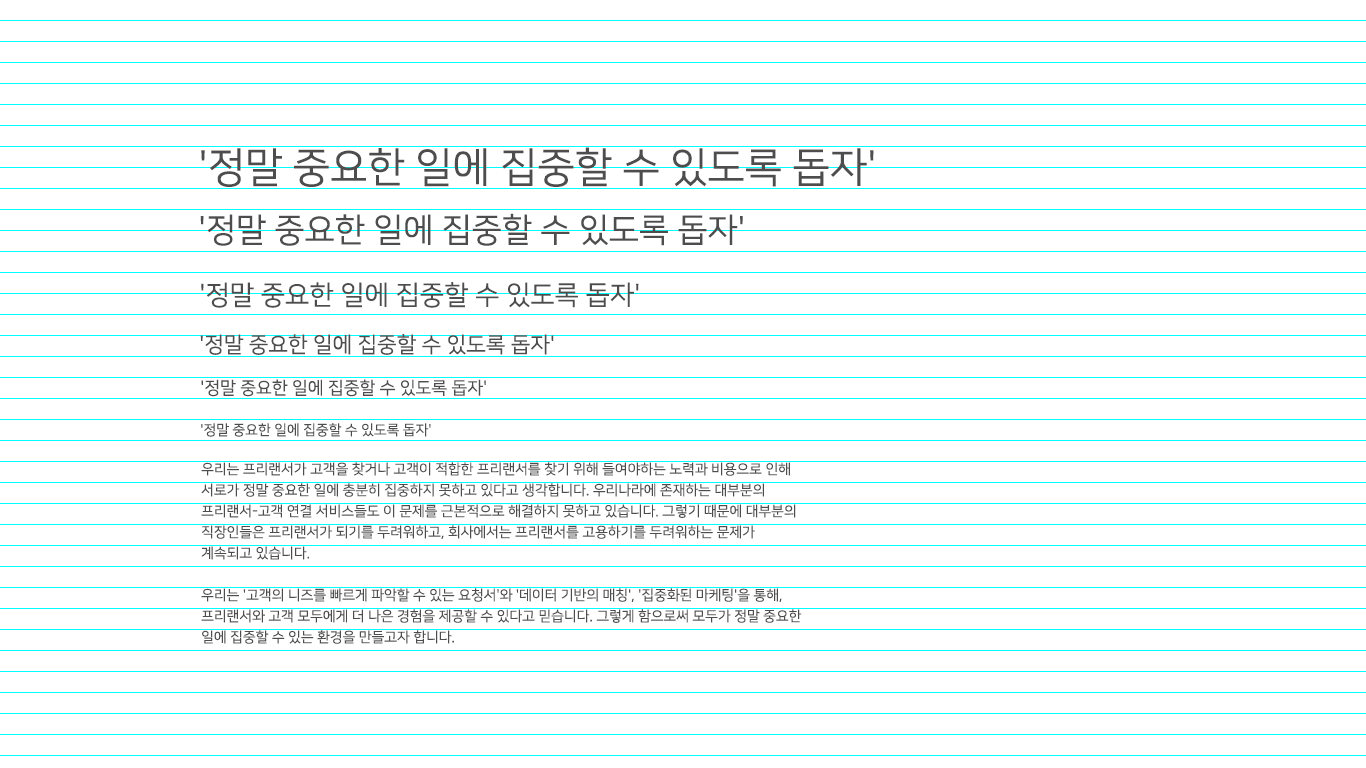
<style>
.page{position:relative;width:1366px;height:768px;background:#ffffff}
.page>*{position:absolute;margin:0}
.t1{font:41.1px "NanumSquareR";color:#4d4d4d}
.t2{font:33.1px "NanumSquareR";color:#4d4d4d}
.t3{font:26.7px "NanumSquareR";color:#4d4d4d}
.t4{font:21.5px "NanumSquareR";color:#4d4d4d}
.t5{font:17.4px "NanumSquareR";color:#4d4d4d}
.t6{font:14px "NanumSquareR";color:#4d4d4d}
</style>
<div class="page">
<p class="t1" style="left:201px;top:147px;width:673px;height:40px">'정말 중요한 일에 집중할 수 있도록 돕자'</p>
<p class="t2" style="left:200px;top:213px;width:543px;height:33px">'정말 중요한 일에 집중할 수 있도록 돕자'</p>
<p class="t3" style="left:201px;top:282px;width:438px;height:26px">'정말 중요한 일에 집중할 수 있도록 돕자'</p>
<p class="t4" style="left:200px;top:334px;width:354px;height:21px">'정말 중요한 일에 집중할 수 있도록 돕자'</p>
<p class="t5" style="left:201px;top:379px;width:285px;height:18px">'정말 중요한 일에 집중할 수 있도록 돕자'</p>
<p class="t6" style="left:201px;top:423px;width:230px;height:14px">'정말 중요한 일에 집중할 수 있도록 돕자'</p>
<p class="t6" style="left:201px;top:462px;width:601px;height:182px">우리는 프리랜서가 고객을 찾거나 고객이 적합한 프리랜서를 찾기 위해 들여야하는 노력과 비용으로 인해 서로가 정말 중요한 일에 충분히 집중하지 못하고 있다고 생각합니다. 우리나라에 존재하는 대부분의 프리랜서-고객 연결 서비스들도 이 문제를 근본적으로 해결하지 못하고 있습니다. 그렇기 때문에 대부분의 직장인들은 프리랜서가 되기를 두려워하고, 회사에서는 프리랜서를 고용하기를 두려워하는 문제가 계속되고 있습니다.<br><br>우리는 '고객의 니즈를 빠르게 파악할 수 있는 요청서'와 '데이터 기반의 매칭', '집중화된 마케팅'을 통해, 프리랜서와 고객 모두에게 더 나은 경험을 제공할 수 있다고 믿습니다. 그렇게 함으로써 모두가 정말 중요한 일에 집중할 수 있는 환경을 만들고자 합니다.</p>
</div>
